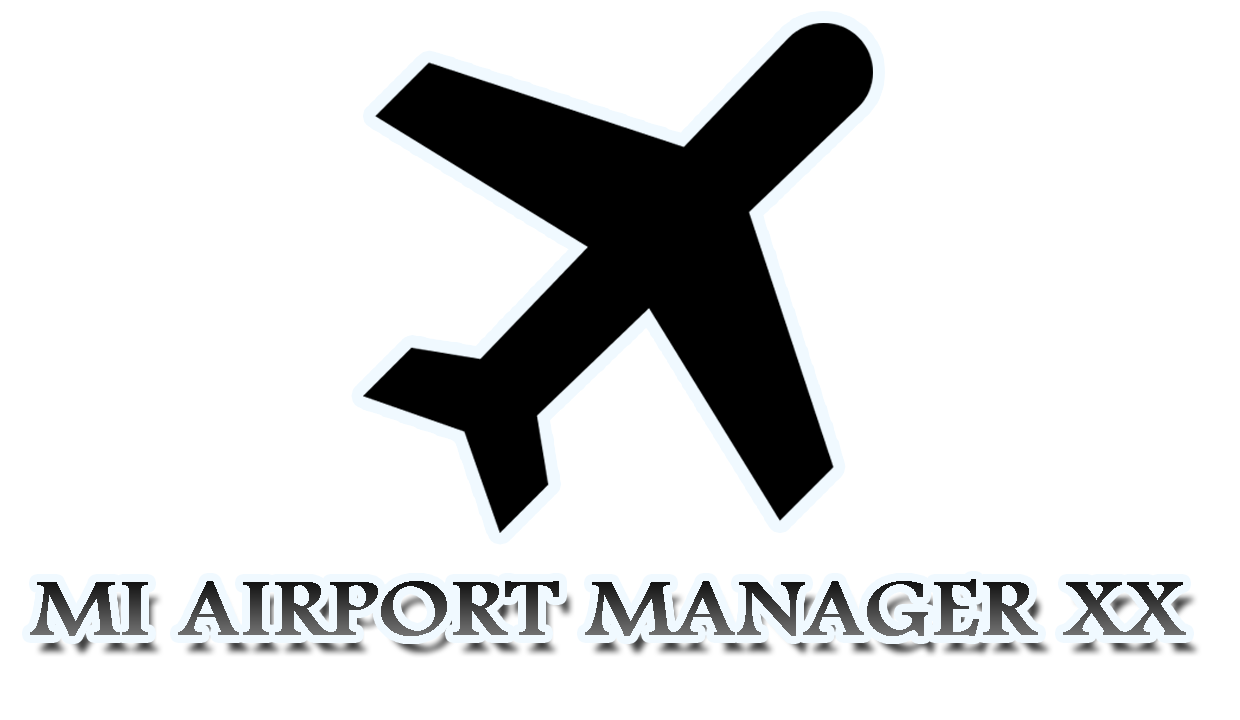
<style>
.page{position:relative;width:1240px;height:720px;background:#ffffff}
.page>*{position:absolute;margin:0}
.t1{font:84.2px "FootlightMTLight";text-transform:uppercase;font-weight:bold;scale:1.16 1}
</style>
<div class="page">
<p class="t1" style="left:30px;top:579px;width:1156px;height:57px">MI Airport manager xx</p>
</div>
